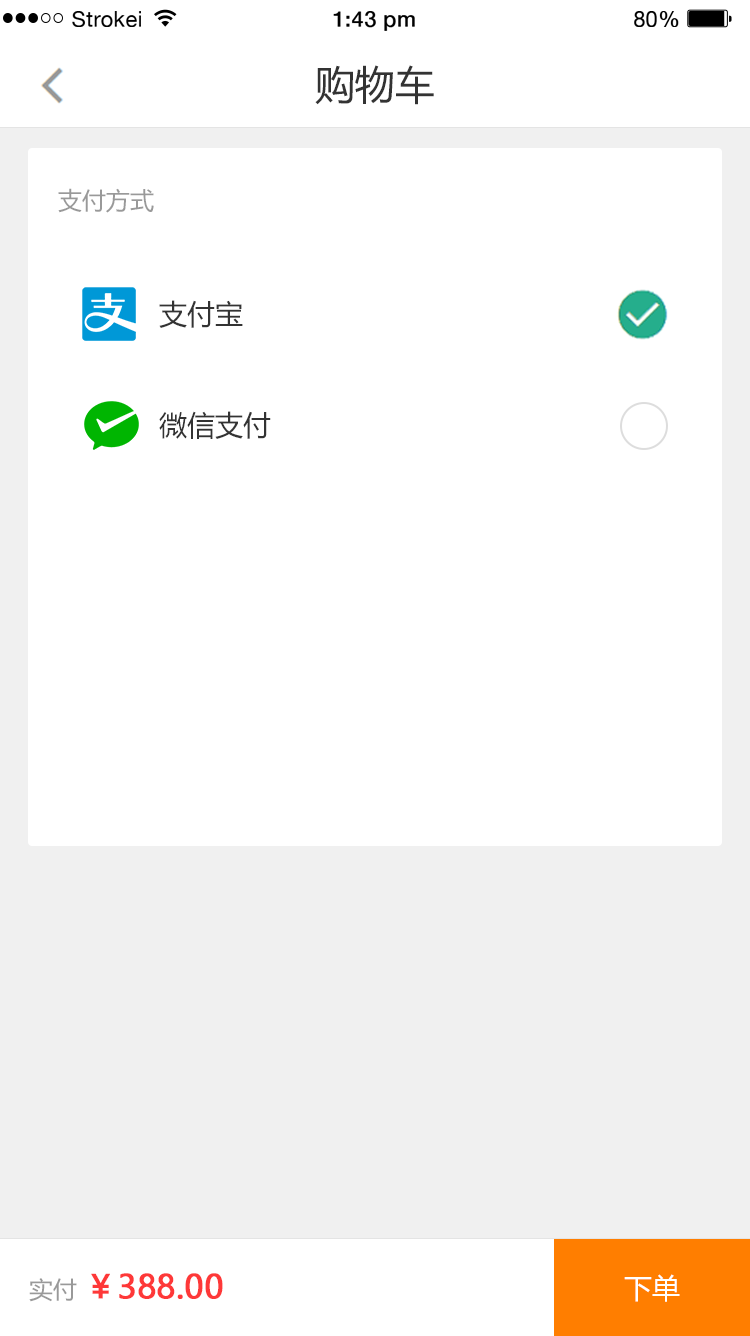
<style>
.page{position:relative;width:750px;height:1336px;background:#ffffff}
.page>*{position:absolute;margin:0}
.t1{font:21.8px "HelveticaNeue";letter-spacing:0.02em;color:#000000}
.t2{font:21.8px "HelveticaNeue-Medium";letter-spacing:0.02em;color:#000000}
.t3{font:40px "MicrosoftYaHei";color:#333333}
.t4{font:24px "MicrosoftYaHei";color:#999999}
.t5{font:28px "MicrosoftYaHei";color:#333333}
.t6{font:32px "MicrosoftYaHei";color:#fe3838;font-weight:bold}
.t7{font:28px "MicrosoftYaHei";color:#ffffff}
</style>
<div class="page">
<p class="t1" style="left:72px;top:11px;width:69px;height:16px">Strokei</p>
<p class="t2" style="left:333px;top:11px;width:82px;height:20px">1:43 pm</p>
<p class="t1" style="left:634px;top:11px;width:45px;height:16px">80<span class="t2">%</span></p>
<p class="t3" style="left:315px;top:65px;width:119px;height:40px">购物车</p>
<p class="t4" style="left:58px;top:188px;width:96px;height:25px">支付方式</p>
<p class="t5" style="left:159px;top:300px;width:84px;height:28px">支付宝</p>
<p class="t5" style="left:159px;top:411px;width:112px;height:28px">微信支付</p>
<p class="t6" style="left:29px;top:1273px;width:194px;height:29px"><span class="t4">实付 </span>￥388.00</p>
<p class="t7" style="left:624px;top:1274px;width:56px;height:28px">下单</p>
</div>
